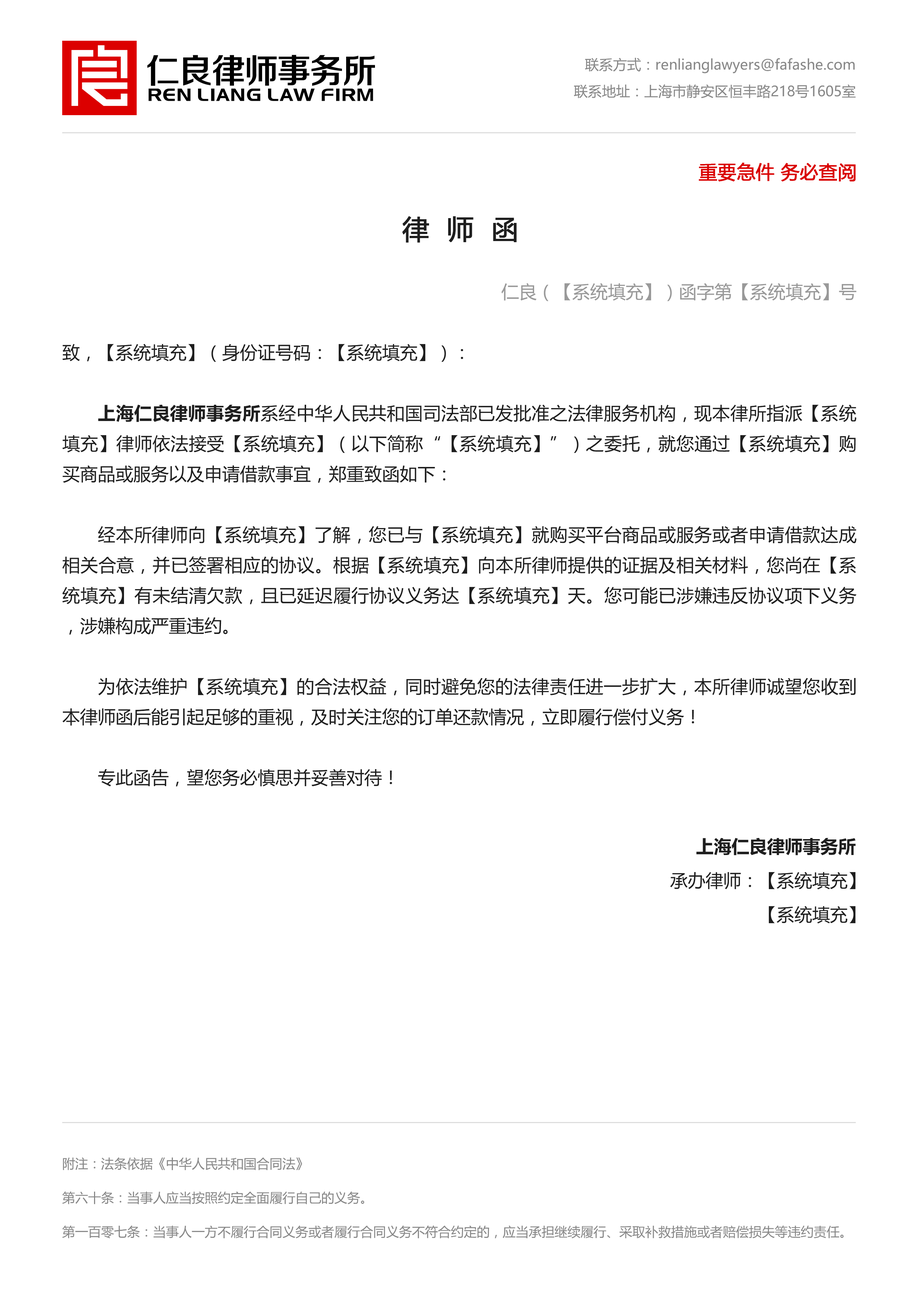
<style>
.page{position:relative;width:918px;height:1299px;background:#ffffff}
.page>*{position:absolute;margin:0}
.t1{font:14.1px/26.7px "MicrosoftYaHei";color:#888888}
.t2{font:18.5px "MicrosoftYaHei";color:#da0000;font-weight:bold}
.t3{font:26.7px "MicrosoftYaHei";color:#1e1e1e;font-weight:bold}
.t4{font:17.8px/30.4px "MicrosoftYaHei";color:#1e1e1e}
.t5{font:17.8px/30.4px "MicrosoftYaHei";color:#999999}
.t6{font:17.8px/30.4px "MicrosoftYaHei-Bold";color:#1e1e1e}
.t7{font:17.8px "MicrosoftYaHei-Bold";color:#1e1e1e}
.t8{font:17.8px/34.1px "MicrosoftYaHei";color:#1e1e1e}
.t9{font:13px/34.1px "MicrosoftYaHei";color:#888888}
</style>
<div class="page">
<p class="t1" style="left:574px;top:58px;width:282px;height:40px;text-align:right">联系方式：renlianglawyers@fafashe.com<br>联系地址：上海市静安区恒丰路218号1605室</p>
<p class="t2" style="left:699px;top:163px;width:157px;height:18px">重要急件 务必查阅</p>
<p class="t3" style="left:402px;top:216px;width:115px;height:26px">律  师  函</p>
<p class="t4" style="left:62px;top:283px;width:795px;height:503px;text-align:right"><span class="t5">仁良（【系统填充】）函字第【系统填充】号<br></span><br>致，【系统填充】（身份证号码：【系统填充】）：<br><br><span class="t6">上海仁良律师事务所</span>系经中华人民共和国司法部已发批准之法律服务机构，现本律所指派【系统填充】律师依法接受【系统填充】（以下简称“【系统填充】”）之委托，就您通过【系统填充】购买商品或服务以及申请借款事宜，郑重致函如下：<br><br>经本所律师向【系统填充】了解，您已与【系统填充】就购买平台商品或服务或者申请借款达成相关合意，并已签署相应的协议。根据【系统填充】向本所律师提供的证据及相关材料，您尚在【系统填充】有未结清欠款，且已延迟履行协议义务达【系统填充】天。您可能已涉嫌违反协议项下义务，涉嫌构成严重违约。<br><br>为依法维护【系统填充】的合法权益，同时避免您的法律责任进一步扩大，本所律师诚望您收到本律师函后能引起足够的重视，及时关注您的订单还款情况，立即履行偿付义务！<br><br>专此函告，望您务必慎思并妥善对待！</p>
<p class="t7" style="left:696px;top:837px;width:160px;height:18px">上海仁良律师事务所</p>
<p class="t8" style="left:670px;top:872px;width:186px;height:51px;text-align:right">承办律师：【系统填充】<br>【系统填充】</p>
<p class="t9" style="left:62px;top:1157px;width:782px;height:81px;text-align:justify">附注：法条依据《中华人民共和国合同法》<br>第六十条：当事人应当按照约定全面履行自己的义务。<br>第一百零七条：当事人一方不履行合同义务或者履行合同义务不符合约定的，应当承担继续履行、采取补救措施或者赔偿损失等违约责任。</p>
</div>
